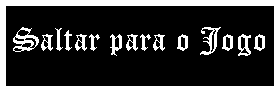
<style>
.page{position:relative;width:280px;height:92px;background:#000000}
.page>*{position:absolute;margin:0}
.t1{font:33px "OldEnglishTextMT";color:#ffffff}
</style>
<div class="page">
<p class="t1" style="left:13px;top:27px;width:252px;height:29px">Saltar para o Jogo</p>
</div>
